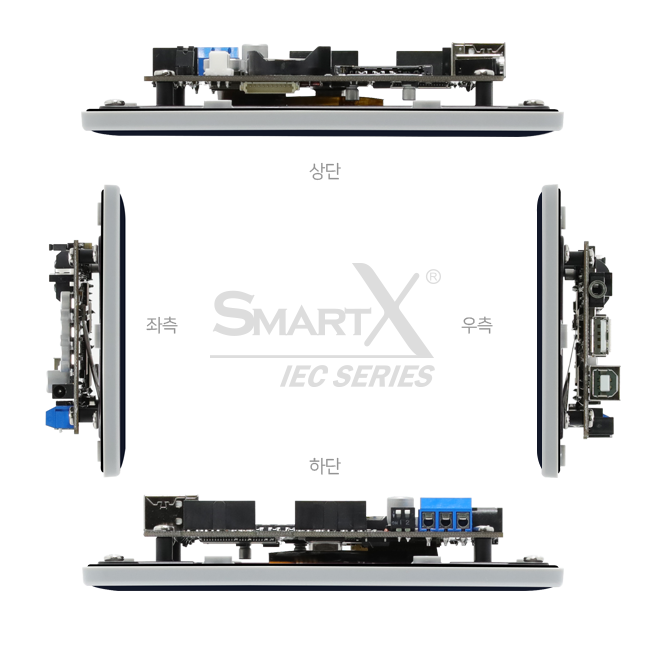
<style>
.page{position:relative;width:650px;height:650px;background:#ffffff}
.page>*{position:absolute;margin:0}
.t1{font:18px "NanumSquareR";letter-spacing:-0.03em;color:#939393}
</style>
<div class="page">
<p class="t1" style="left:309px;top:162px;width:32px;height:19px">상단</p>
<p class="t1" style="left:146px;top:316px;width:32px;height:18px">좌측</p>
<p class="t1" style="left:461px;top:316px;width:32px;height:18px">우측</p>
<p class="t1" style="left:309px;top:457px;width:32px;height:18px">하단</p>
</div>
